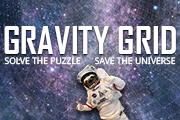
<style>
.page{position:relative;width:180px;height:120px}
.page>*{position:absolute;margin:0}
.t1{font:37.4px "AgencyFB-Bold";color:#ffffff}
.t2{font:9px "DroidSans";color:#ffffff}
</style>
<div class="page">
<p class="t1" style="left:4px;top:26px;width:172px;height:28px">GRAVITY GRID</p>
<p class="t2" style="left:4px;top:57px;width:172px;height:8px">SOLVE THE PUZZLE      SAVE THE UNIVERSE</p>
</div>
